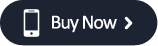
<style>
.page{position:relative;width:158px;height:46px;background:#1c2431}
.page>*{position:absolute;margin:0}
.t1{font:20px "Calibri";letter-spacing:-0.05em;color:#ffffff}
</style>
<div class="page">
<p class="t1" style="left:52px;top:15px;width:65px;height:18px">Buy Now</p>
</div>
